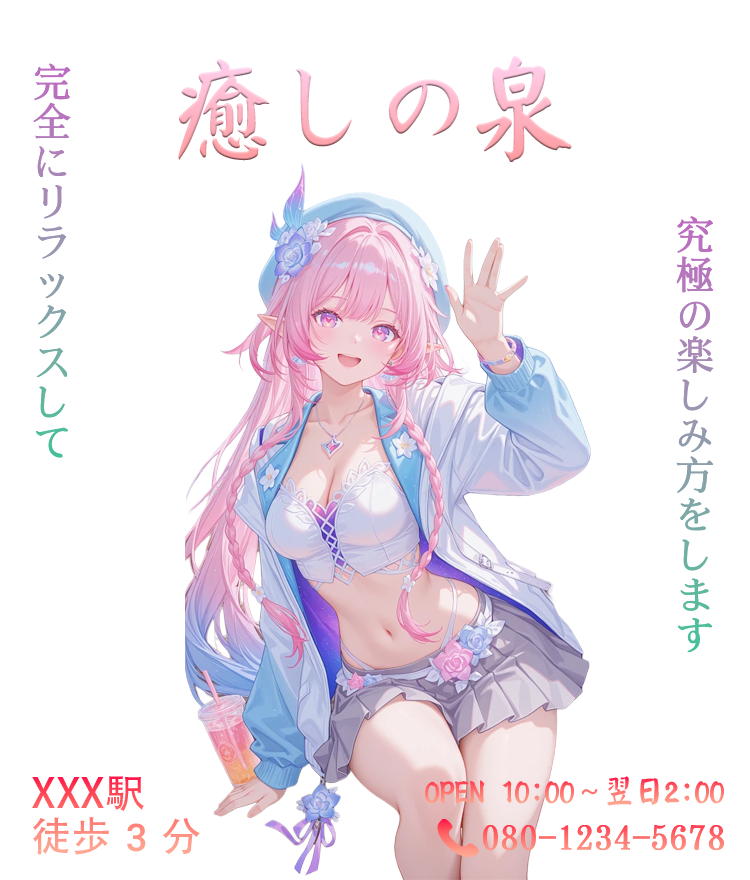
<style>
.page{position:relative;width:750px;height:880px;background:#ffffff}
.page>*{position:absolute;margin:0}
.t1{font:40px/40px "SimSong-Bold"}
.t2{font:100px "Tianshi-Yanti"}
.t3{font:40px/40px "AdobeHeitiStd-Regular"}
.t4{font:40px/40px "NotoColorEmoji-SVG"}
.t5{font:30px "Tianshi-Yanti"}
</style>
<div class="page">
<p class="t1" style="left:33px;top:63px;width:38px;height:395px">完<br>全<br>に<br>リ<br>ラ<br>ッ<br>ク<br>ス<br>し<br>て</p>
<p class="t2" style="left:178px;top:56px;width:394px;height:106px">癒しの泉</p>
<p class="t1" style="left:676px;top:216px;width:38px;height:436px">究<br>極<br>の<br>楽<br>し<br>み<br>方<br>を<br>し<br>ま<br>す</p>
<p class="t3" style="left:32px;top:776px;width:168px;height:79px">XXX駅<br>徒歩<span class="t4">3</span>分</p>
<p class="t5" style="left:425px;top:776px;width:299px;height:30px">OPEN 10:00～翌日2:00</p>
</div>
